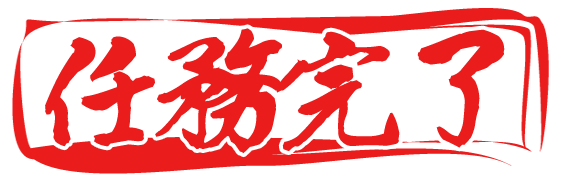
<style>
.page{position:relative;width:568px;height:184px;background:#ffffff}
.page>*{position:absolute;margin:0}
.t1{font:120px "AB_ootori";color:#ea1c1c}
</style>
<div class="page">
<p class="t1" style="left:45px;top:28px;width:460px;height:126px">任務完了</p>
</div>
